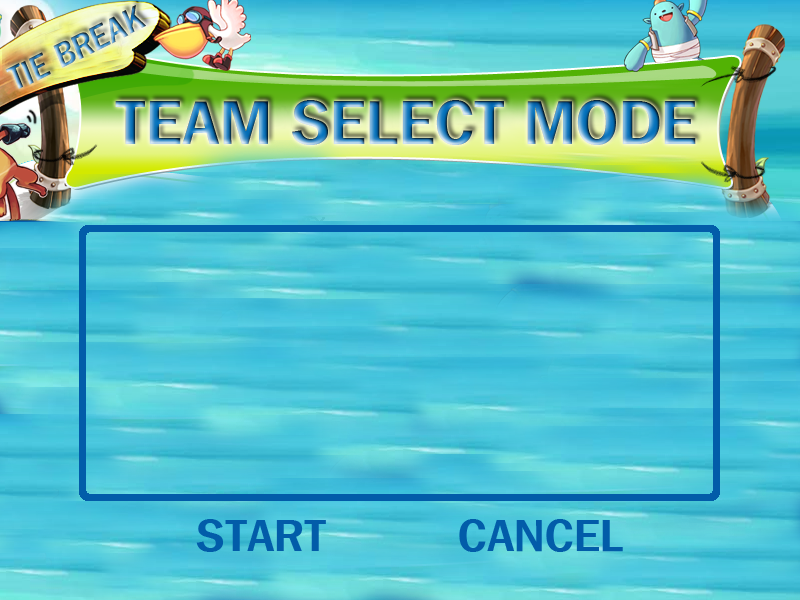
<style>
.page{position:relative;width:800px;height:600px}
.page>*{position:absolute;margin:0}
.t1{font:32.3px "HYsupB";scale:0.91 1}
.t2{font:59px "HYsupB"}
.t3{font:43px "HYsupB";color:#025ca9}
</style>
<div class="page">
<p class="t1" style="left:6px;top:5px;width:140px;height:84px;rotate:-27deg">TIE BREAK</p>
<p class="t2" style="left:115px;top:100px;width:581px;height:45px">TEAM SELECT MODE</p>
<p class="t3" style="left:196px;top:519px;width:130px;height:33px">START</p>
<p class="t3" style="left:459px;top:519px;width:164px;height:33px">CANCEL</p>
</div>
